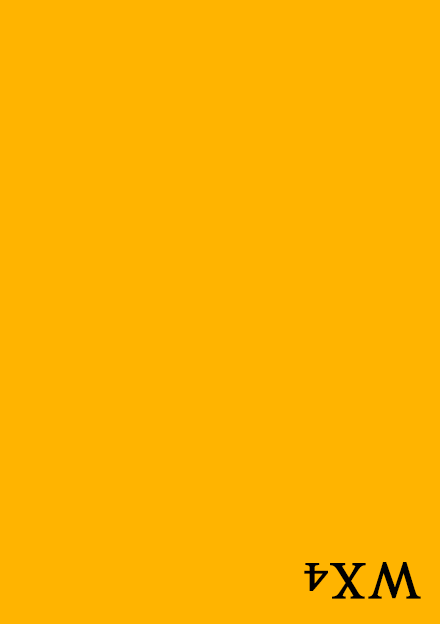
<style>
.page{position:relative;width:440px;height:624px;background:#ffb400}
.page>*{position:absolute;margin:0}
.t1{font:64.9px "AdobeThai-Regular";letter-spacing:0.02em;color:#000000;font-weight:bold}
</style>
<div class="page">
<p class="t1" style="left:304px;top:562px;width:117px;height:37px;rotate:180deg">WX4</p>
</div>
